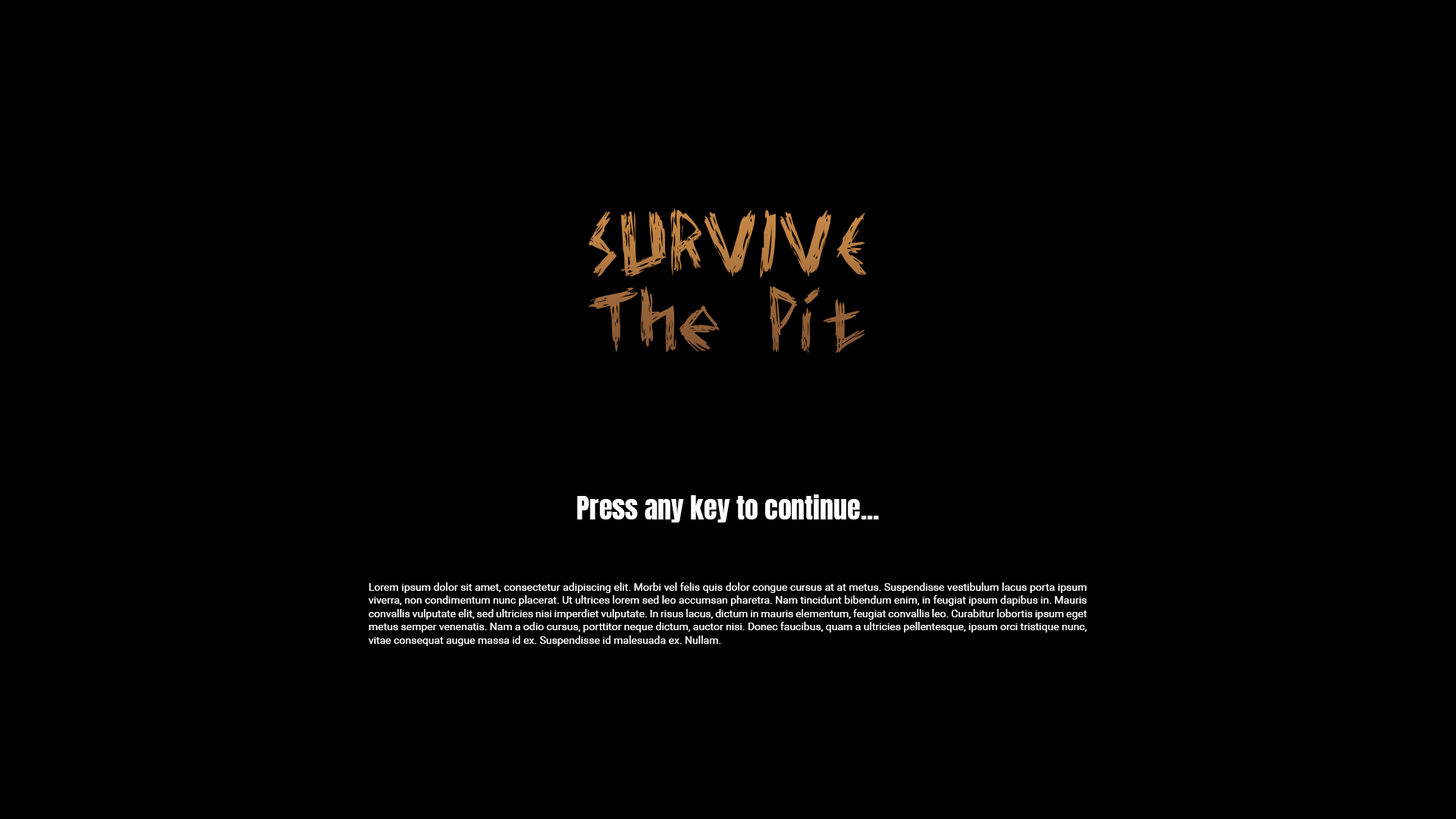
<style>
.page{position:relative;width:1456px;height:819px;background:#000000}
.page>*{position:absolute;margin:0}
.t1{font:94px/75.8px "Elmar'sscratchtype"}
.t2{font:27.3px "Anton-Regular";color:#ffffff}
.t3{font:10.6px/13.2px "Roboto-Regular";color:#ffffff}
</style>
<div class="page">
<p class="t1" style="left:588px;top:209px;width:279px;height:144px;text-align:center">SURVIVE<br>The Pit</p>
<p class="t2" style="left:577px;top:494px;width:302px;height:28px">Press any key to continue...</p>
<p class="t3" style="left:369px;top:582px;width:718px;height:64px;text-align:justify">Lorem ipsum dolor sit amet, consectetur adipiscing elit. Morbi vel felis quis dolor congue cursus at at metus. Suspendisse vestibulum lacus porta ipsum viverra, non condimentum nunc placerat. Ut ultrices lorem sed leo accumsan pharetra. Nam tincidunt bibendum enim, in feugiat ipsum dapibus in. Mauris convallis vulputate elit, sed ultricies nisi imperdiet vulputate. In risus lacus, dictum in mauris elementum, feugiat convallis leo. Curabitur lobortis ipsum eget metus semper venenatis. Nam a odio cursus, porttitor neque dictum, auctor nisi. Donec faucibus, quam a ultricies pellentesque, ipsum orci tristique nunc, vitae consequat augue massa id ex. Suspendisse id malesuada ex. Nullam.</p>
</div>
